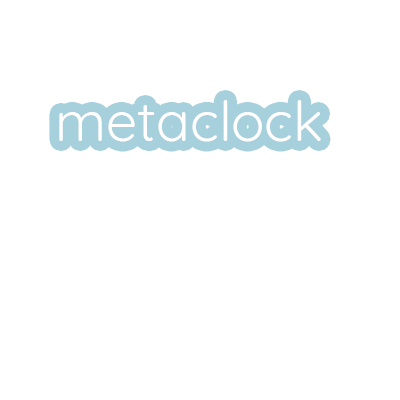
<style>
.page{position:relative;width:400px;height:400px;background:#ffffff}
.page>*{position:absolute;margin:0}
.t1{font:56px "Quicksand-Regular";color:#ffffff}
</style>
<div class="page">
<p class="t1" style="left:59px;top:100px;width:262px;height:42px">metaclock</p>
</div>
